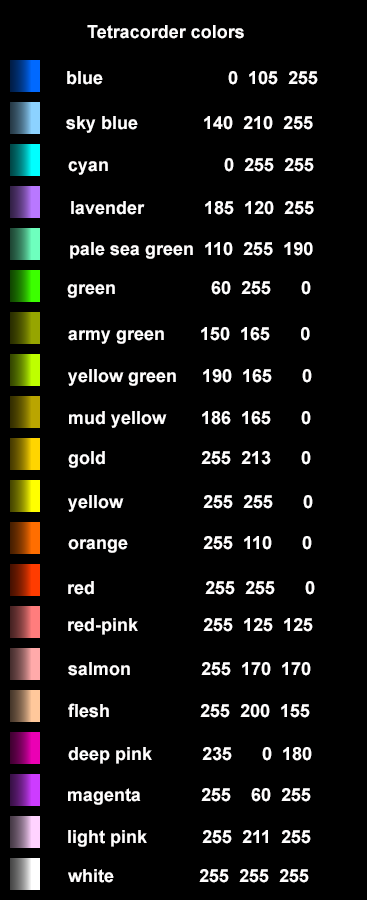
<style>
.page{position:relative;width:367px;height:900px;background:#000000}
.page>*{position:absolute;margin:0}
.t1{font:18px "Arial-BoldMT";color:#fffefe}
</style>
<div class="page">
<p class="t1" style="left:87px;top:25px;width:157px;height:14px">Tetracorder colors</p>
<p class="t1" style="left:67px;top:71px;width:251px;height:14px">blue                         0  105  255</p>
<p class="t1" style="left:66px;top:116px;width:247px;height:17px">sky blue             140  210  255</p>
<p class="t1" style="left:68px;top:158px;width:246px;height:17px">cyan                       0  255  255</p>
<p class="t1" style="left:71px;top:201px;width:243px;height:14px">lavender            185  120  255</p>
<p class="t1" style="left:70px;top:242px;width:243px;height:17px">pale sea green  110  255  190</p>
<p class="t1" style="left:67px;top:281px;width:244px;height:17px">green                   60  255      0</p>
<p class="t1" style="left:68px;top:327px;width:242px;height:17px">army green       150  165      0</p>
<p class="t1" style="left:68px;top:369px;width:244px;height:17px">yellow green     190  165      0</p>
<p class="t1" style="left:69px;top:411px;width:242px;height:17px">mud yellow       186  165      0</p>
<p class="t1" style="left:68px;top:451px;width:243px;height:17px">gold                   255  213      0</p>
<p class="t1" style="left:68px;top:495px;width:245px;height:17px">yellow                255  255      0</p>
<p class="t1" style="left:68px;top:536px;width:244px;height:17px">orange               255  110      0</p>
<p class="t1" style="left:68px;top:581px;width:247px;height:14px">red                      255  255      0</p>
<p class="t1" style="left:68px;top:618px;width:245px;height:17px">red-pink             255  125  125</p>
<p class="t1" style="left:68px;top:662px;width:243px;height:14px">salmon              255  170  170</p>
<p class="t1" style="left:68px;top:703px;width:242px;height:15px">flesh                  255  200  155</p>
<p class="t1" style="left:68px;top:747px;width:244px;height:17px">deep pink          235      0  180</p>
<p class="t1" style="left:68px;top:788px;width:243px;height:17px">magenta            255    60  255</p>
<p class="t1" style="left:68px;top:830px;width:243px;height:17px">light pink           255  211  255</p>
<p class="t1" style="left:68px;top:869px;width:241px;height:14px">white                 255  255  255</p>
</div>
